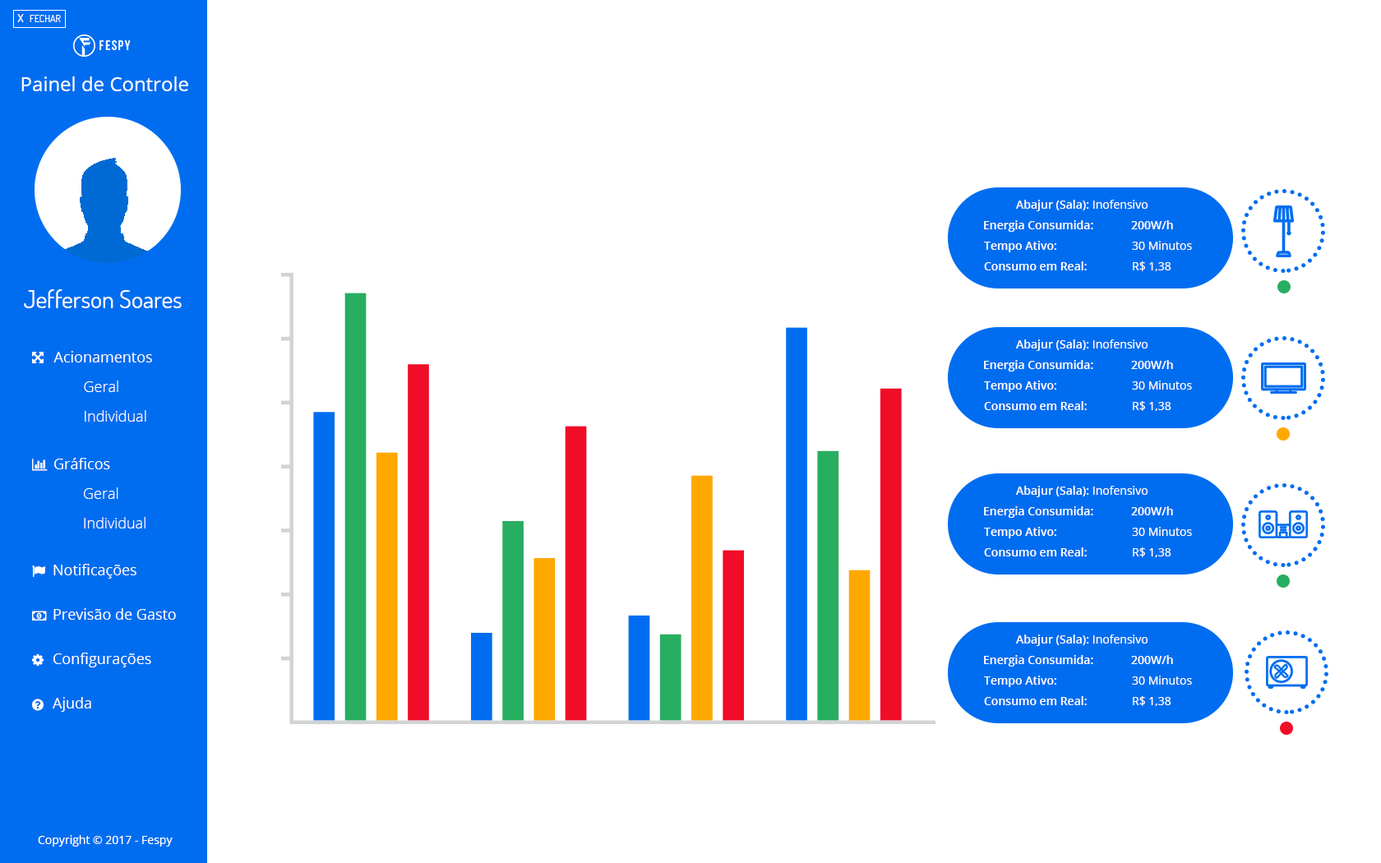
<style>
.page{position:relative;width:1381px;height:863px;background:#ffffff}
.page>*{position:absolute;margin:0}
.t1{font:11.5px "Dosis-Medium";color:#ffffff}
.t2{font:9.9px "Dosis-Regular";color:#ffffff}
.t3{font:19.7px "OpenSans-Regular";color:#ffffff}
.t4{font:11.5px "OpenSans-SemiBold";color:#ffffff}
.t5{font:11.5px "OpenSans-Regular";color:#ffffff}
.t6{font:24.7px "Dosis-Regular";color:#ffffff}
.t7{font:14.8px/29.6px "OpenSans-Light";color:#ffffff}
.t8{font:14.8px/29.6px "OpenSans-Regular";color:#ffffff}
.t9{font:14.8px "OpenSans-Regular";color:#ffffff}
</style>
<div class="page">
<p class="t1" style="left:17px;top:14px;width:7px;height:8px">X</p>
<p class="t2" style="left:30px;top:15px;width:31px;height:7px">FECHAR</p>
<p class="t3" style="left:21px;top:76px;width:167px;height:15px">Painel de Controle</p>
<p class="t4" style="left:1016px;top:200px;width:132px;height:11px">Abajur (Sala):<span class="t5"> Inofensivo</span></p>
<p class="t4" style="left:984px;top:220px;width:189px;height:12px">Energia Consumida:  200W/h</p>
<p class="t4" style="left:984px;top:241px;width:208px;height:11px">Tempo Ativo:  <span class="t5">    30 Minutos</span></p>
<p class="t4" style="left:984px;top:261px;width:188px;height:10px">Consumo em Real:   <span class="t5">R$ 1,38</span></p>
<p class="t6" style="left:24px;top:289px;width:158px;height:19px">Jefferson Soares</p>
<p class="t4" style="left:1016px;top:340px;width:132px;height:11px">Abajur (Sala):<span class="t5"> Inofensivo</span></p>
<p class="t7" style="left:53px;top:351px;width:99px;height:71px"><span class="t8">Acionamentos<br> </span>Geral<br> Individual</p>
<p class="t4" style="left:984px;top:360px;width:189px;height:12px">Energia Consumida:  200W/h</p>
<p class="t4" style="left:984px;top:381px;width:208px;height:11px">Tempo Ativo:  <span class="t5">    30 Minutos</span></p>
<p class="t4" style="left:984px;top:401px;width:188px;height:10px">Consumo em Real:   <span class="t5">R$ 1,38</span></p>
<p class="t7" style="left:54px;top:458px;width:92px;height:71px"><span class="t8">Gráficos<br> </span>Geral <br> Individual</p>
<p class="t4" style="left:1016px;top:486px;width:132px;height:11px">Abajur (Sala):<span class="t5"> Inofensivo</span></p>
<p class="t4" style="left:984px;top:506px;width:189px;height:12px">Energia Consumida:  200W/h</p>
<p class="t4" style="left:984px;top:527px;width:208px;height:12px">Tempo Ativo:  <span class="t5">    30 Minutos</span></p>
<p class="t4" style="left:984px;top:548px;width:188px;height:9px">Consumo em Real:   <span class="t5">R$ 1,38</span></p>
<p class="t9" style="left:53px;top:564px;width:83px;height:15px"><span class="t3"><br></span><br>Notificações</p>
<p class="t9" style="left:53px;top:608px;width:123px;height:12px"><span class="t3"><br></span><br>Previsão de Gasto</p>
<p class="t4" style="left:1016px;top:635px;width:132px;height:11px">Abajur (Sala):<span class="t5"> Inofensivo</span></p>
<p class="t9" style="left:53px;top:653px;width:98px;height:15px"><span class="t3"><br></span><br>Configurações</p>
<p class="t4" style="left:984px;top:655px;width:189px;height:12px">Energia Consumida:  200W/h</p>
<p class="t4" style="left:984px;top:676px;width:208px;height:11px">Tempo Ativo:  <span class="t5">    30 Minutos</span></p>
<p class="t9" style="left:53px;top:697px;width:38px;height:15px"><span class="t3"><br></span><br>Ajuda</p>
<p class="t4" style="left:984px;top:696px;width:188px;height:10px">Consumo em Real:   <span class="t5">R$ 1,38</span></p>
<p class="t5" style="left:38px;top:835px;width:135px;height:12px">Copyright © 2017 - Fespy</p>
</div>
